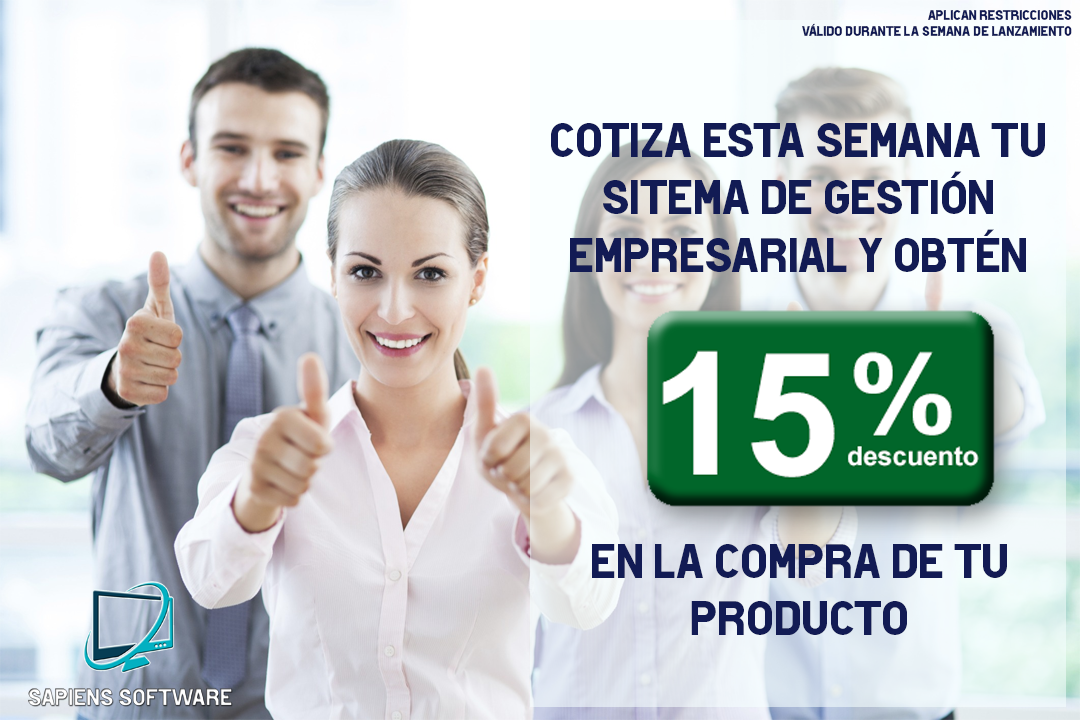
<style>
.page{position:relative;width:1080px;height:720px}
.page>*{position:absolute;margin:0}
.t1{font:14px "HotelDeParisXe";color:#121b54}
.t2{font:48px "HotelDeParisXe";color:#121b54}
</style>
<div class="page">
<p class="t1" style="left:802px;top:10px;width:270px;height:26px;text-align:right">Aplican restricciones<br>Válido durante la semana de lanzamiento</p>
<p class="t2" style="left:551px;top:123px;width:494px;height:149px;text-align:center">Cotiza esta semana tu <br>sitema de gestión <br>empresarial y obtén</p>
<p class="t2" style="left:592px;top:544px;width:415px;height:91px;text-align:center">En la compra de tu<br>producto</p>
</div>
